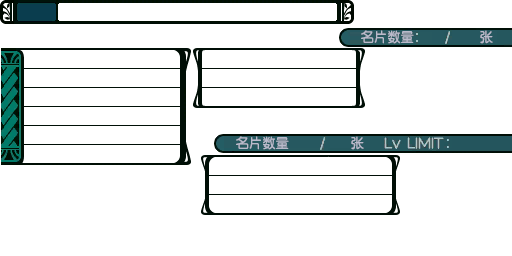
<style>
.page{position:relative;width:512px;height:256px;background:#ffffff}
.page>*{position:absolute;margin:0}
.t1{font:13.3px "FZY3--GB1-4";letter-spacing:0.025em;color:#babacb;scale:0.97 1}
</style>
<div class="page">
<p class="t1" style="left:361px;top:30px;width:53px;height:14px">名片数量</p>
<p class="t1" style="left:480px;top:30px;width:13px;height:14px">张</p>
<p class="t1" style="left:236px;top:136px;width:53px;height:14px">名片数量</p>
<p class="t1" style="left:351px;top:136px;width:13px;height:14px">张</p>
</div>
